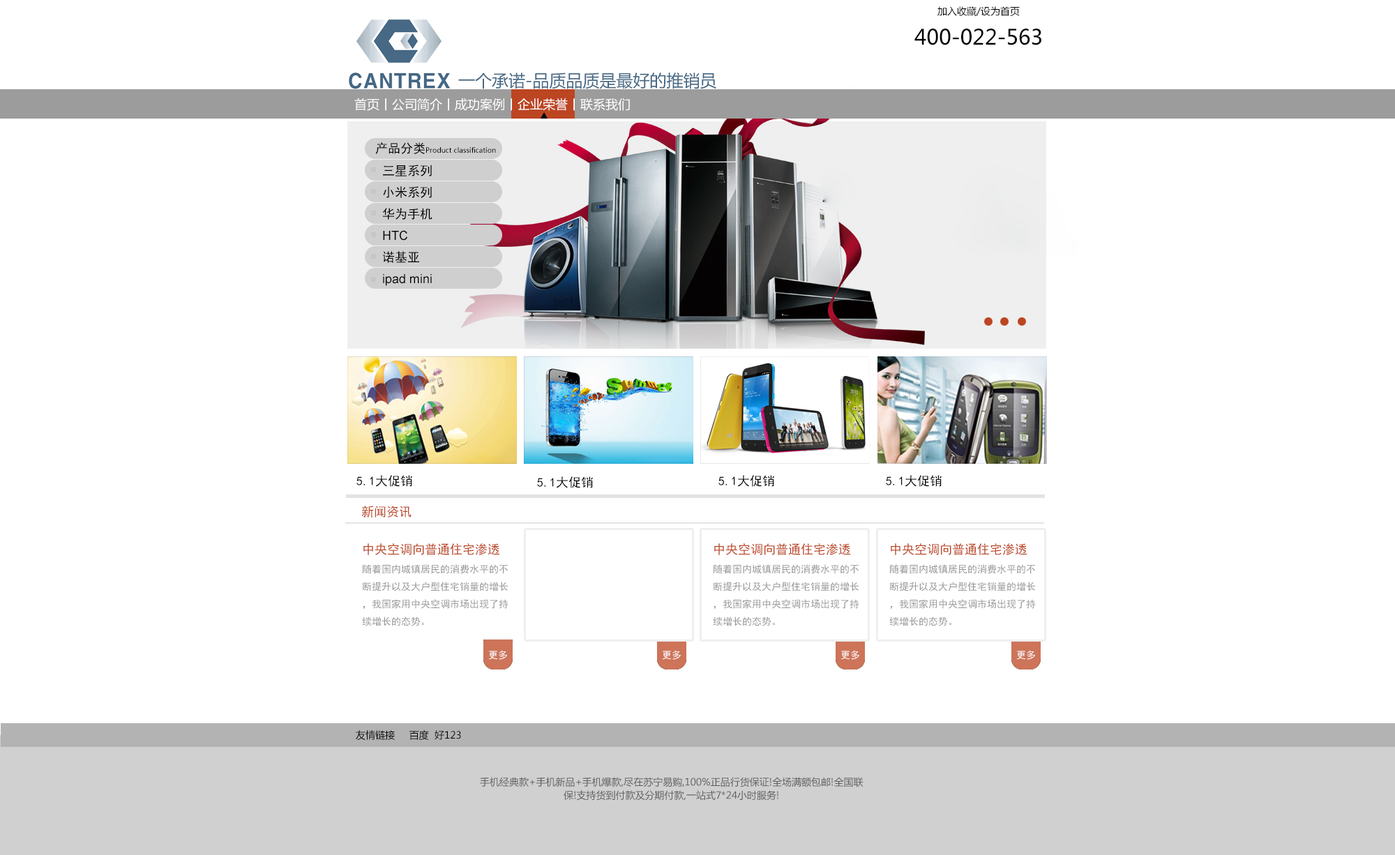
<style>
.page{position:relative;width:1395px;height:855px;background:#ffffff}
.page>*{position:absolute;margin:0}
.t1{font:9.8px "MicrosoftYaHei";color:#000000}
.t2{font:20.9px "MicrosoftYaHei";color:#000000}
.t3{font:16.7px "MicrosoftYaHei";color:#476985}
.t4{font:12.6px "MicrosoftYaHei";color:#ffffff}
.t5{font:7px "MicrosoftYaHei";color:#000000}
.t6{font:12.6px "SimHei";color:#000000}
.t7{font:12.6px/21.6px "SimHei";color:#000000}
.t8{font:12.6px/21.6px "ArialMT";color:#000000}
.t9{font:12.6px "SimHei";color:#bc4522}
.t10{font:9.8px/17.4px "SimHei";color:#979797}
.t11{font:12.6px/17.4px "SimHei";color:#000000}
.t12{font:9.8px "SimHei";color:#ffffff}
.t13{font:9.8px/13.2px "MicrosoftYaHei";color:#5f5f5f}
</style>
<div class="page">
<p class="t1" style="left:937px;top:6px;width:83px;height:10px">加入收藏/设为首页</p>
<p class="t2" style="left:914px;top:29px;width:127px;height:16px">400-022-563</p>
<p class="t3" style="left:458px;top:73px;width:258px;height:16px">一个承诺-品质品质是最好的推销员</p>
<p class="t4" style="left:354px;top:98px;width:276px;height:13px">首页丨公司简介丨成功案例丨企业荣誉丨联系我们</p>
<p class="t5" style="left:375px;top:142px;width:121px;height:12px"><span class="t6">产品分类</span>Product classification</p>
<p class="t7" style="left:382px;top:165px;width:50px;height:121px">三星系列<br>小米系列<br>华为手机<br><span class="t8">HTC<br></span>诺基亚<br><span class="t8">ipad mini</span></p>
<p class="t6" style="left:356px;top:475px;width:56px;height:12px">5.1大促销</p>
<p class="t6" style="left:537px;top:476px;width:56px;height:12px">5.1大促销</p>
<p class="t6" style="left:718px;top:475px;width:56px;height:12px">5.1大促销</p>
<p class="t6" style="left:886px;top:475px;width:55px;height:12px">5.1大促销</p>
<p class="t9" style="left:361px;top:506px;width:50px;height:11px">新闻资讯</p>
<p class="t9" style="left:363px;top:543px;width:137px;height:12px">中央空调向普通住宅渗透</p>
<p class="t9" style="left:714px;top:543px;width:137px;height:12px">中央空调向普通住宅渗透</p>
<p class="t9" style="left:891px;top:543px;width:136px;height:12px">中央空调向普通住宅渗透</p>
<p class="t10" style="left:362px;top:564px;width:146px;height:62px"><span class="t11"><br></span>随着国内城镇居民的消费水平的不断提升以及大户型住宅销量的增长，我国家用中央空调市场出现了持续增长的态势。</p>
<p class="t10" style="left:713px;top:564px;width:146px;height:62px"><span class="t11"><br></span>随着国内城镇居民的消费水平的不断提升以及大户型住宅销量的增长，我国家用中央空调市场出现了持续增长的态势。</p>
<p class="t10" style="left:889px;top:564px;width:147px;height:62px"><span class="t11"><br></span>随着国内城镇居民的消费水平的不断提升以及大户型住宅销量的增长，我国家用中央空调市场出现了持续增长的态势。</p>
<p class="t12" style="left:489px;top:650px;width:18px;height:10px">更多</p>
<p class="t12" style="left:662px;top:650px;width:19px;height:10px">更多</p>
<p class="t12" style="left:841px;top:650px;width:18px;height:10px">更多</p>
<p class="t12" style="left:1017px;top:650px;width:18px;height:10px">更多</p>
<p class="t1" style="left:356px;top:730px;width:105px;height:10px">友情链接     百度  好123</p>
<p class="t13" style="left:480px;top:777px;width:383px;height:24px;text-align:center">手机经典款+手机新品+手机爆款,尽在苏宁易购,100%正品行货保证!全场满额包邮!全国联保!支持货到付款及分期付款,一站式7*24小时服务!</p>
</div>
